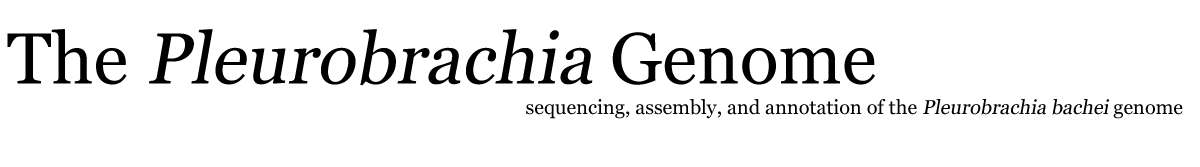
<style>
.page{position:relative;width:1200px;height:167px;background:#ffffff}
.page>*{position:absolute;margin:0}
.t1{font:72px "Georgia";color:#000000;font-style:italic}
.t2{font:72px "Georgia";color:#000000}
.t3{font:20px "Georgia";color:#000000}
.t4{font:20px "Georgia";color:#000000;font-style:italic}
</style>
<div class="page">
<p class="t1" style="left:7px;top:29px;width:868px;height:57px"><span class="t2">The </span>Pleurobrachia<span class="t2"> Genome</span></p>
<p class="t3" style="left:526px;top:99px;width:657px;height:20px">sequencing, assembly, and annotation of the<span class="t4"> Pleurobrachia bachei </span>genome</p>
</div>
